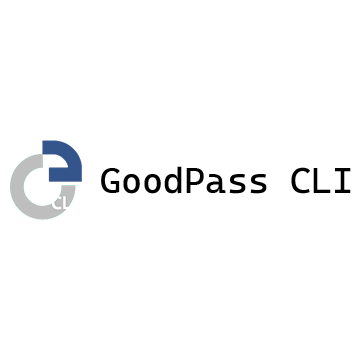
<style>
.page{position:relative;width:360px;height:360px;background:#ffffff}
.page>*{position:absolute;margin:0}
.t1{font:36px "CascadiaCode-Roman";color:#000000}
</style>
<div class="page">
<p class="t1" style="left:101px;top:166px;width:250px;height:28px">GoodPass CLI</p>
</div>
